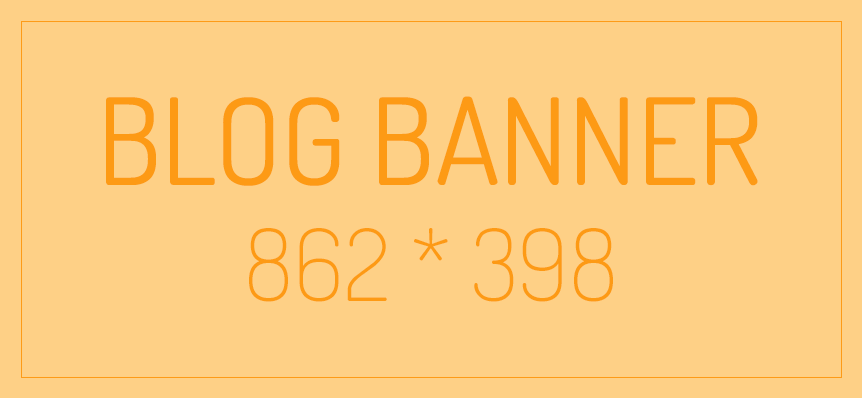
<style>
.page{position:relative;width:862px;height:398px;background:#fed086}
.page>*{position:absolute;margin:0}
.t1{font:120px "Dosis-Regular";color:#fd9a15;text-transform:uppercase}
.t2{font:100px "Dosis-ExtraLight";color:#fd9a15}
</style>
<div class="page">
<p class="t1" style="left:106px;top:96px;width:652px;height:90px">Blog Banner</p>
<p class="t2" style="left:249px;top:228px;width:364px;height:74px">862 * 398</p>
</div>
